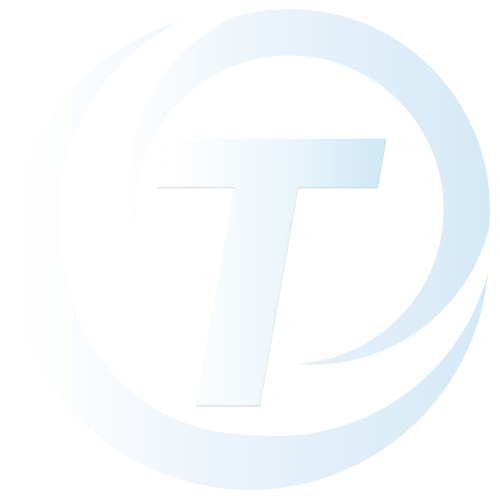
<style>
.page{position:relative;width:500px;height:500px;background:#ffffff}
.page>*{position:absolute;margin:0}
.t1{font:377px "Roboto-BlackItalic";color:#f1f8fc}
</style>
<div class="page">
<p class="t1" style="left:156px;top:138px;width:231px;height:269px">T</p>
</div>
